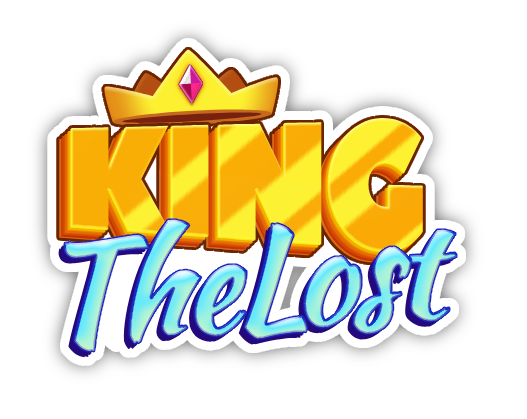
<style>
.page{position:relative;width:527px;height:419px;background:#ffffff}
.page>*{position:absolute;margin:0}
.t1{font:164.3px "PeaceSans";letter-spacing:-0.05em;scale:0.87 1}
.t2{font:136.9px "KaushanScript-Regular";letter-spacing:-0.05em;font-weight:bold}
</style>
<div class="page">
<p class="t1" style="left:71px;top:117px;width:352px;height:135px">KING</p>
<p class="t2" style="left:64px;top:219px;width:393px;height:133px;rotate:-4deg">TheLost</p>
</div>
